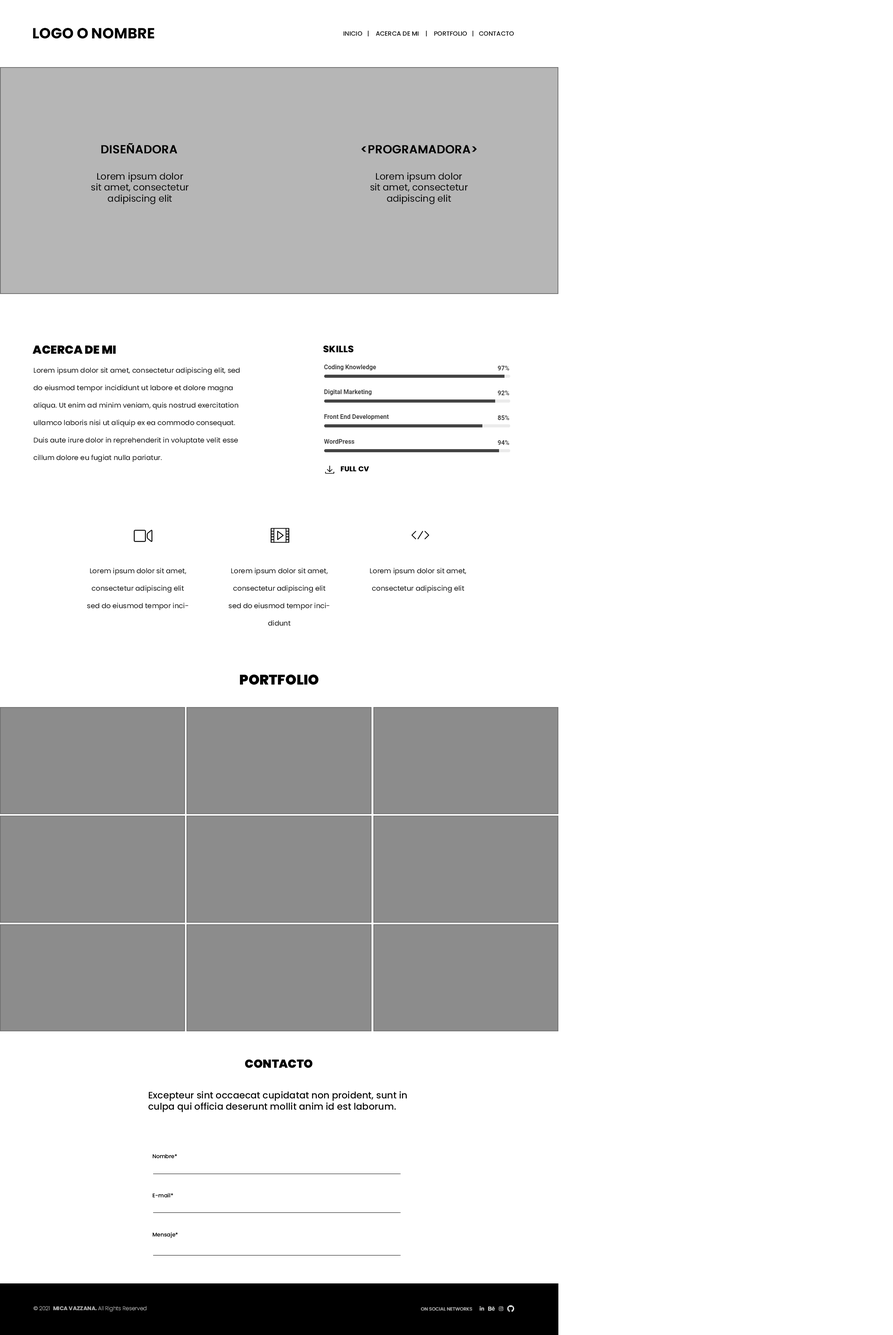
<style>
.page{position:relative;width:893px;height:1335px;background:#ffffff}
.page>*{position:absolute;margin:0}
.t1{font:14.7px "Poppins-Bold";color:#000000;text-transform:uppercase}
.t2{font:6.2px "Poppins-Medium";color:#000000;text-transform:uppercase}
.t3{font:11.6px "Poppins-Medium";color:#000000;text-transform:uppercase;font-weight:bold}
.t4{font:9.3px "Poppins-Regular";color:#000000}
.t5{font:11.6px "Poppins-Black";color:#000000;text-transform:uppercase}
.t6{font:9.3px "Poppins-Bold";color:#000000;text-transform:uppercase;font-weight:bold}
.t7{font:7px/17.5px "Poppins-Regular";color:#000000}
.t8{font:7px "Poppins-Bold";color:#000000;text-transform:uppercase;font-weight:bold}
.t9{font:14px "Poppins-Black";color:#000000}
.t10{font:9.3px "Poppins-Medium";color:#000000}
.t11{font:5.4px "Poppins-Medium";color:#000000}
.t12{font:5.4px "Poppins-ExtraLight";color:#b0b0b0}
.t13{font:5.4px "ArialMT";color:#b0b0b0}
.t14{font:5.4px "Poppins-Bold";color:#b0b0b0}
</style>
<div class="page">
<p class="t1" style="left:33px;top:28px;width:121px;height:11px">logo o nombre</p>
<p class="t2" style="left:344px;top:31px;width:170px;height:5px">inicio   |    acerca de mi    |    portfolio   |   contacto</p>
<p class="t3" style="left:101px;top:143px;width:76px;height:11px">diseñadora</p>
<p class="t3" style="left:361px;top:145px;width:116px;height:9px">&lt;programadora&gt;</p>
<p class="t4" style="left:91px;top:172px;width:98px;height:32px;text-align:center">Lorem ipsum dolor <br>sit amet, consectetur <br>adipiscing elit</p>
<p class="t4" style="left:370px;top:172px;width:98px;height:32px;text-align:center">Lorem ipsum dolor <br>sit amet, consectetur <br>adipiscing elit</p>
<p class="t5" style="left:33px;top:345px;width:83px;height:9px">acerca de mi</p>
<p class="t6" style="left:323px;top:346px;width:31px;height:7px">skills</p>
<p class="t7" style="left:33px;top:367px;width:207px;height:95px">Lorem ipsum dolor sit amet, consectetur adipiscing elit, sed do eiusmod tempor incididunt ut labore et dolore magna aliqua. Ut enim ad minim veniam, quis nostrud exercitation ullamco laboris nisi ut aliquip ex ea commodo consequat. Duis aute irure dolor in reprehenderit in voluptate velit esse cillum dolore eu fugiat nulla pariatur.</p>
<p class="t8" style="left:341px;top:466px;width:28px;height:6px">full cv</p>
<p class="t7" style="left:87px;top:568px;width:101px;height:42px;text-align:center">Lorem ipsum dolor sit amet, consectetur adipiscing elit sed do eiusmod tempor incididunt</p>
<p class="t7" style="left:228px;top:568px;width:102px;height:58px;text-align:center">Lorem ipsum dolor sit amet, consectetur adipiscing elit sed do eiusmod tempor incididunt</p>
<p class="t7" style="left:370px;top:568px;width:96px;height:25px;text-align:center">Lorem ipsum dolor sit amet, consectetur adipiscing elit</p>
<p class="t9" style="left:240px;top:674px;width:79px;height:11px">PORTFOLIO</p>
<p class="t5" style="left:245px;top:1059px;width:68px;height:9px">contacto</p>
<p class="t10" style="left:149px;top:1091px;width:258px;height:21px">Excepteur sint occaecat cupidatat non proident, sunt in culpa qui officia deserunt mollit anim id est laborum.</p>
<p class="t11" style="left:152px;top:1154px;width:26px;height:84px">Nombre*<br><br><br><br><br><br>E-mail*<br><br><br><br><br><br>Mensaje*</p>
<p class="t12" style="left:33px;top:1306px;width:114px;height:6px"><span class="t13">© </span>2021  <span class="t14">MICA VAZZANA. </span>All Rights Reserved</p>
</div>
